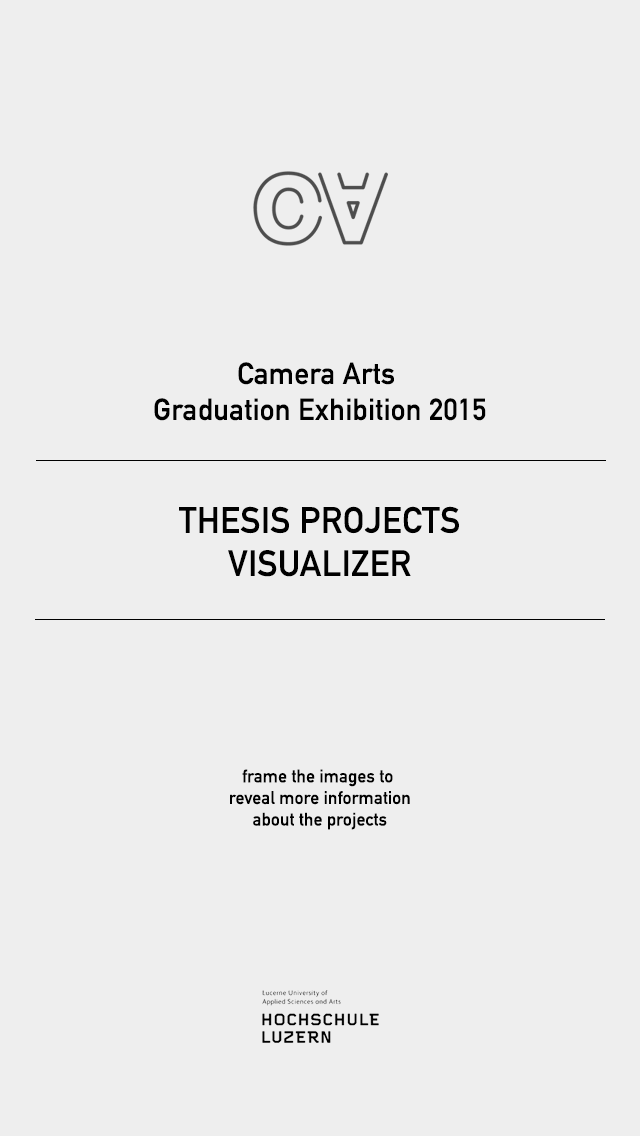
<style>
.page{position:relative;width:640px;height:1136px;background:#eeeeee}
.page>*{position:absolute;margin:0}
.t1{font:18px "DINAlternate-Bold";color:#000000}
.t2{font:30px "DINAlternate-Bold";color:#000000}
.t3{font:36px "DINAlternate-Bold";color:#000000}
</style>
<div class="page">
<p class="t1" style="left:154px;top:362px;width:332px;height:468px;text-align:center"><span class="t2">Camera Arts <br>Graduation Exhibition 2015<br><br><br></span><span class="t3">THESIS PROJECTS<br>VISUALIZER<br><br><br><br><br><br><br><br></span>frame the images to <br>reveal more information<br>about the projects</p>
</div>
